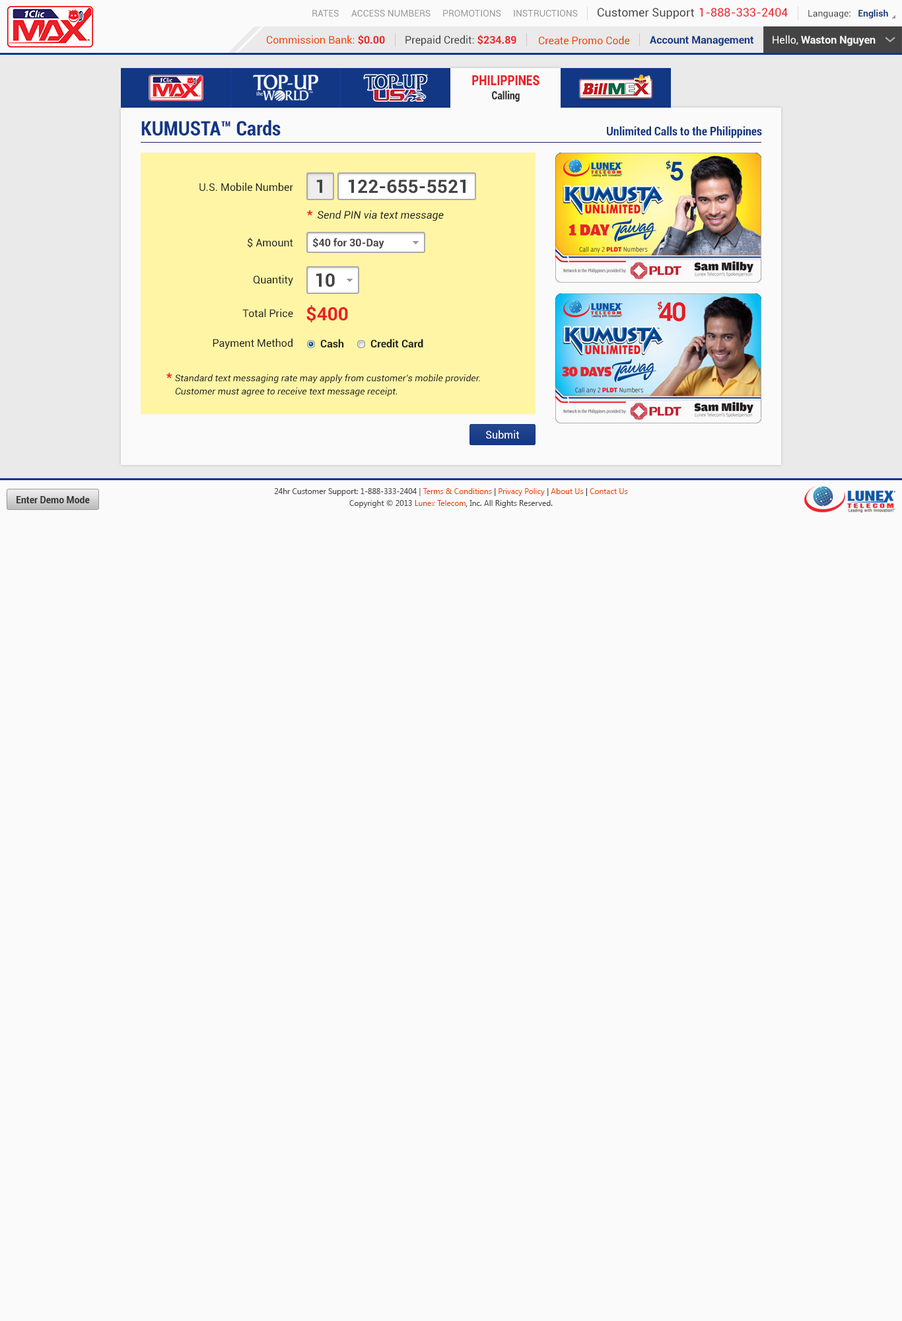
<style>
.page{position:relative;width:902px;height:1321px;background:#fafafa}
.page>*{position:absolute;margin:0}
.t1{font:9.2px "Roboto-Regular";color:#999999}
.t2{font:11.6px "Roboto-Regular";color:#444444}
.t3{font:11.6px "Roboto-Regular";color:#ec2029}
.t4{font:9.2px "Roboto-Regular";color:#444444}
.t5{font:9.2px "Roboto-Bold";color:#123785}
.t6{font:10.6px "Roboto-Regular";color:#ee4400}
.t7{font:10.6px "Roboto-Bold";color:#ec2028}
.t8{font:10.6px "Roboto-Regular";color:#444444}
.t9{font:10.6px "Roboto-Bold";color:#123785}
.t10{font:10.6px "Roboto-Bold";color:#fafafa}
.t11{font:10.6px "Roboto-Regular";color:#fafafa}
.t12{font:14.1px "Roboto-Black";color:#ec2028;scale:0.81 1}
.t13{font:11.3px "Roboto-Black";color:#333333;scale:0.81 1}
.t14{font:19.8px "Roboto-BoldCondensed";color:#123785}
.t15{font:11.9px "Roboto-BoldCondensed";color:#123785}
.t16{font:10.6px "Roboto-Regular";color:#222222}
.t17{font:18.5px "Roboto-Bold";color:#444444}
.t18{font:10.6px "Roboto-Italic";color:#222222}
.t19{font:15.9px "Roboto-Regular";color:#ec1e26}
.t20{font:10.6px "Roboto-Bold";color:#444444}
.t21{font:18.5px "Roboto-Bold";color:#ec2028}
.t22{font:10.6px "Roboto-Bold";color:#222222}
.t23{font:9.2px/13.2px "Roboto-Italic";color:#222222}
.t24{font:15.9px/11.9px "Roboto-Regular";color:#ec1e26}
.t25{font:10.6px "Roboto-Regular";color:#ffffff}
.t26{font:9.2px "Roboto-Bold";color:#333333}
.t27{font:7.9px/11.9px "SegoeUI";color:#444444}
.t28{font:7.9px/11.9px "SegoeUI";color:#ee4400}
.t29{font:7.9px/11.9px "SegoeUI";color:#333333}
</style>
<div class="page">
<p class="t1" style="left:312px;top:10px;width:27px;height:7px">RATES</p>
<p class="t1" style="left:351px;top:10px;width:80px;height:7px">ACCESS NUMBERS</p>
<p class="t1" style="left:443px;top:10px;width:58px;height:7px">PROMOTIONS</p>
<p class="t1" style="left:514px;top:10px;width:64px;height:7px">INSTRUCTIONS</p>
<p class="t2" style="left:598px;top:8px;width:96px;height:11px">Customer Support</p>
<p class="t3" style="left:700px;top:8px;width:88px;height:9px">1-888-333-2404</p>
<p class="t4" style="left:809px;top:9px;width:80px;height:9px">Language:   <span class="t5">English</span></p>
<p class="t6" style="left:267px;top:35px;width:118px;height:10px">Commission Bank: <span class="t7">$0.00</span></p>
<p class="t8" style="left:406px;top:35px;width:111px;height:11px">Prepaid Credit: <span class="t7">$234.89</span></p>
<p class="t6" style="left:539px;top:36px;width:91px;height:9px">Create Promo Code</p>
<p class="t9" style="left:650px;top:36px;width:104px;height:10px">Account Management</p>
<p class="t10" style="left:773px;top:35px;width:103px;height:11px"><span class="t11">Hello, </span>Waston Nguyen</p>
<p class="t12" style="left:472px;top:75px;width:68px;height:11px">PHILIPPINES</p>
<p class="t13" style="left:492px;top:91px;width:28px;height:11px">Calling</p>
<p class="t14" style="left:141px;top:120px;width:140px;height:16px">KUMUSTA™ Cards</p>
<p class="t15" style="left:607px;top:126px;width:155px;height:12px">Unlimited Calls to the Philippines</p>
<p class="t16" style="left:200px;top:182px;width:93px;height:10px">U.S. Mobile Number</p>
<p class="t17" style="left:316px;top:180px;width:6px;height:13px">1</p>
<p class="t17" style="left:348px;top:180px;width:118px;height:14px">122-655-5521</p>
<p class="t18" style="left:307px;top:210px;width:137px;height:11px"><span class="t19">* </span>Send PIN via text message</p>
<p class="t16" style="left:248px;top:238px;width:45px;height:10px">$ Amount</p>
<p class="t20" style="left:312px;top:238px;width:73px;height:11px">$40 for 30-Day</p>
<p class="t16" style="left:254px;top:275px;width:39px;height:11px">Quantity</p>
<p class="t17" style="left:316px;top:274px;width:19px;height:13px">10</p>
<p class="t21" style="left:307px;top:305px;width:41px;height:17px">$400</p>
<p class="t16" style="left:242px;top:309px;width:51px;height:9px">Total Price</p>
<p class="t16" style="left:213px;top:338px;width:80px;height:11px">Payment Method</p>
<p class="t22" style="left:320px;top:339px;width:24px;height:9px">Cash</p>
<p class="t22" style="left:371px;top:339px;width:52px;height:9px">Credit Card</p>
<p class="t23" style="left:166px;top:373px;width:314px;height:23px"><span class="t24">* </span>Standard text messaging rate may apply from customer's mobile provider.<br>    Customer must agree to receive text message receipt.</p>
<p class="t25" style="left:486px;top:430px;width:34px;height:9px">Submit</p>
<p class="t26" style="left:17px;top:496px;width:73px;height:7px">Enter Demo Mode</p>
<p class="t27" style="left:274px;top:488px;width:354px;height:20px;text-align:center">24hr Customer Support: 1-888-333-2404 | <span class="t28">Terms &amp; Conditions</span><span class="t29"> | </span><span class="t28">Privacy Policy</span><span class="t29"> | </span><span class="t28">About Us</span><span class="t29"> | </span><span class="t28">Contact Us<br></span>Copyright © 2013 <span class="t28">Lunex Telecom</span><span class="t29">,</span> Inc. All Rights Reserved.</p>
</div>
